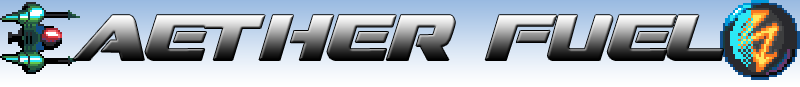
<style>
.page{position:relative;width:800px;height:87px}
.page>*{position:absolute;margin:0}
.t1{font:64px "DreamMMA";letter-spacing:0.03em}
</style>
<div class="page">
<p class="t1" style="left:73px;top:15px;width:651px;height:45px">aether fuel</p>
</div>
